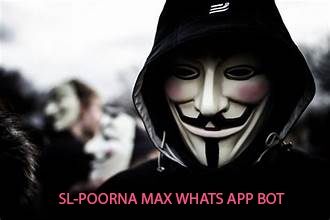
<style>
.page{position:relative;width:330px;height:220px;background:#010101}
.page>*{position:absolute;margin:0}
.t1{font:16px "MyriadPro-Regular";color:#f85689}
</style>
<div class="page">
<p class="t1" style="left:59px;top:193px;width:226px;height:11px">SL-POORNA MAX WHATS APP BOT</p>
</div>
